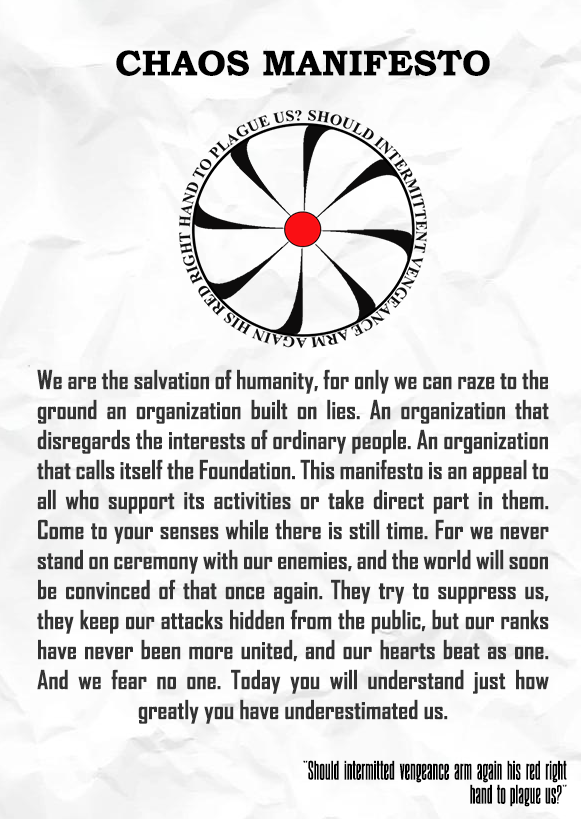
<style>
.page{position:relative;width:581px;height:819px}
.page>*{position:absolute;margin:0}
.t1{font:36px "BookmanOldStyle-Bold";color:#000000}
.t2{font:25px "AgencyFB-Bold";color:#333333}
.t3{font:20px "August-Cyr-Bold";color:#000000}
.t4{font:20px "August-Cyr-Bold";color:#333333}
</style>
<div class="page">
<p class="t1" style="left:116px;top:50px;width:374px;height:26px">CHAOS MANIFESTO</p>
<p class="t2" style="left:37px;top:369px;width:512px;height:355px;text-align:justify">We are the salvation of humanity, for only we can raze to the ground an organization built on lies. An organization that disregards the interests of ordinary people. An organization that calls itself the Foundation. This manifesto is an appeal to all who support its activities or take direct part in them. Come to your senses while there is still time. For we never stand on ceremony with our enemies, and the world will soon be convinced of that once again. They try to suppress us, they keep our attacks hidden from the public, but our ranks have never been more united, and our hearts beat as one. And we fear no one. Today you will understand just how greatly you have underestimated us.</p>
<p class="t3" style="left:303px;top:760px;width:264px;height:47px;text-align:justify">"Should intermitted vengeance arm again his red right hand to plague us?<span class="t4">"</span></p>
</div>
